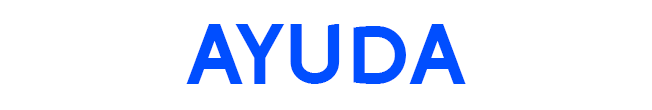
<style>
.page{position:relative;width:652px;height:110px;background:#ffffff}
.page>*{position:absolute;margin:0}
.t1{font:76.4px "Oliciy";color:#004eff}
</style>
<div class="page">
<p class="t1" style="left:186px;top:24px;width:280px;height:60px">AYUDA</p>
</div>
